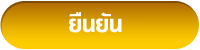
<style>
.page{position:relative;width:200px;height:50px}
.page>*{position:absolute;margin:0}
.t1{font:33.3px "DSNLardPhrao";color:#fefdfb}
</style>
<div class="page">
<p class="t1" style="left:69px;top:12px;width:53px;height:21px">ยืนยัน</p>
</div>
